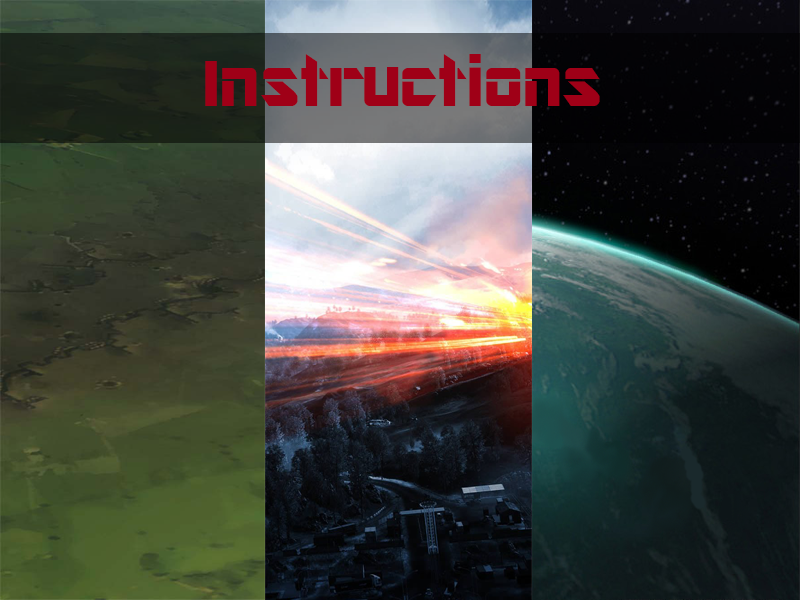
<style>
.page{position:relative;width:800px;height:600px}
.page>*{position:absolute;margin:0}
.t1{font:72px "ARDESTINE";color:#9f0017}
</style>
<div class="page">
<p class="t1" style="left:205px;top:54px;width:395px;height:52px">Instructions</p>
</div>
